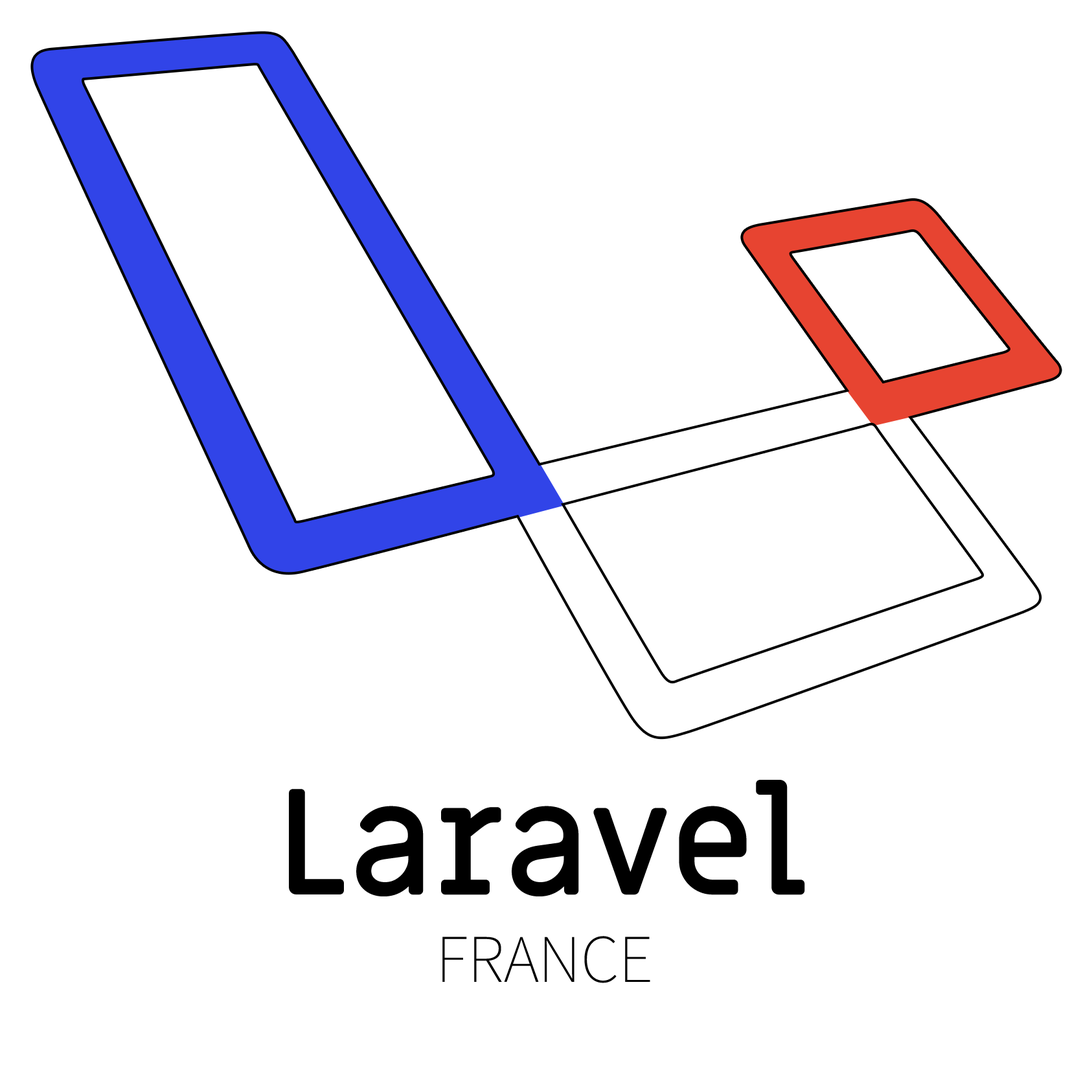
<style>
.page{position:relative;width:1092px;height:1092px;background:#ffffff}
.page>*{position:absolute;margin:0}
.t1{font:145.7px/188.9px "MiriamLibre-Regular";color:#000000;font-weight:bold}
.t2{font:97.2px/89.1px "SourceSansPro-ExtraLight";color:#000000;font-variant:small-caps}
</style>
<div class="page">
<p class="t1" style="left:289px;top:780px;width:516px;height:203px;text-align:center">Laravel<br><span class="t2">france</span></p>
</div>
